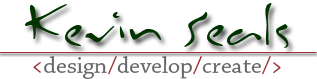
<style>
.page{position:relative;width:317px;height:79px;background:#ffffff}
.page>*{position:absolute;margin:0}
.t1{font:60px "Inkburrow";color:#003300}
.t2{font:24px "ChaparralPro-Regular";color:#666666}
.t3{font:24px "ChaparralPro-Regular";color:#993333}
</style>
<div class="page">
<p class="t1" style="left:25px;top:3px;width:264px;height:45px">Kevin Seals</p>
<p class="t2" style="left:33px;top:56px;width:248px;height:23px"><span class="t3">&lt;</span>design<span class="t3">/</span>develop<span class="t3">/</span>create<span class="t3">/&gt;</span></p>
</div>
